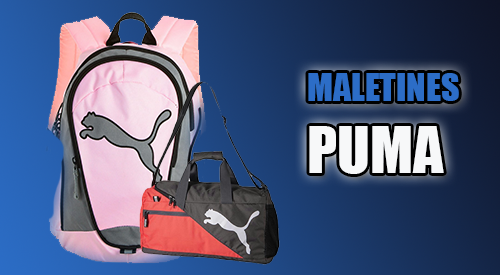
<style>
.page{position:relative;width:500px;height:275px}
.page>*{position:absolute;margin:0}
.t1{font:36px "Impact";color:#2c6dc7;text-transform:uppercase}
.t2{font:60px "Impact";color:#f7f8f9;text-transform:uppercase}
</style>
<div class="page">
<p class="t1" style="left:308px;top:73px;width:151px;height:101px">Maletines <br><span class="t2">PUMA</span></p>
</div>
